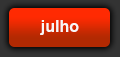
<style>
.page{position:relative;width:120px;height:57px}
.page>*{position:absolute;margin:0}
.t1{font:16.2px "Arial-BoldMT";color:#f7f7f7}
</style>
<div class="page">
<p class="t1" style="left:40px;top:20px;width:39px;height:15px">julho</p>
</div>
